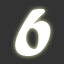
<style>
.page{position:relative;width:64px;height:64px;background:#333333}
.page>*{position:absolute;margin:0}
.t1{font:72px "ForteMT";color:#ffffff}
</style>
<div class="page">
<p class="t1" style="left:15px;top:9px;width:36px;height:47px">6</p>
</div>
